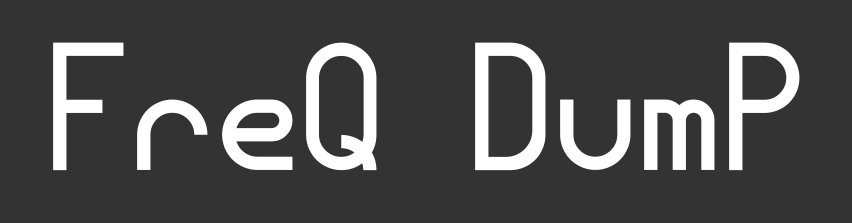
<style>
.page{position:relative;width:852px;height:223px;background:#333333}
.page>*{position:absolute;margin:0}
.t1{font:225px "Modum";color:#ffffff}
</style>
<div class="page">
<p class="t1" style="left:53px;top:42px;width:747px;height:129px">FreQ DumP</p>
</div>
